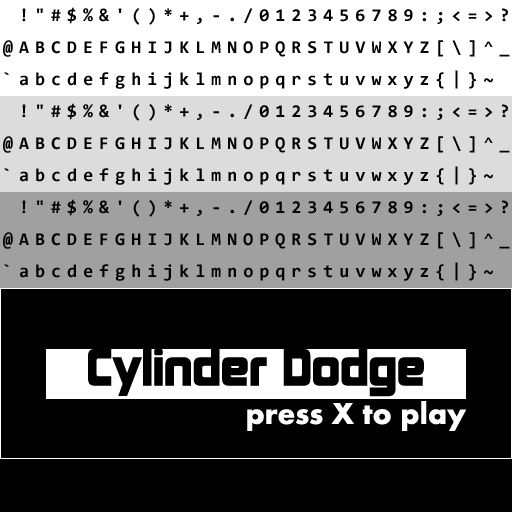
<style>
.page{position:relative;width:512px;height:512px;background:#000000}
.page>*{position:absolute;margin:0}
.t1{font:18px/32px "Consolas-Bold";letter-spacing:0.34em;color:#000000}
.t2{font:48px "Kimberley";color:#000000}
.t3{font:31px "Aharoni-Bold";color:#ffffff}
</style>
<div class="page">
<p class="t1" style="left:3px;top:7px;width:507px;height:82px">!"#$%&amp;'()*+,-./0123456789:;&lt;=&gt;?<br>@ABCDEFGHIJKLMNOPQRSTUVWXYZ[\]^_<br>`abcdefghijklmnopqrstuvwxyz{|}~</p>
<p class="t1" style="left:3px;top:103px;width:507px;height:82px">!"#$%&amp;'()*+,-./0123456789:;&lt;=&gt;?<br>@ABCDEFGHIJKLMNOPQRSTUVWXYZ[\]^_<br>`abcdefghijklmnopqrstuvwxyz{|}~</p>
<p class="t1" style="left:3px;top:199px;width:507px;height:82px">!"#$%&amp;'()*+,-./0123456789:;&lt;=&gt;?<br>@ABCDEFGHIJKLMNOPQRSTUVWXYZ[\]^_<br>`abcdefghijklmnopqrstuvwxyz{|}~</p>
<p class="t2" style="left:88px;top:349px;width:336px;height:48px">Cylinder Dodge</p>
<p class="t3" style="left:247px;top:401px;width:219px;height:30px">press X to play</p>
</div>
